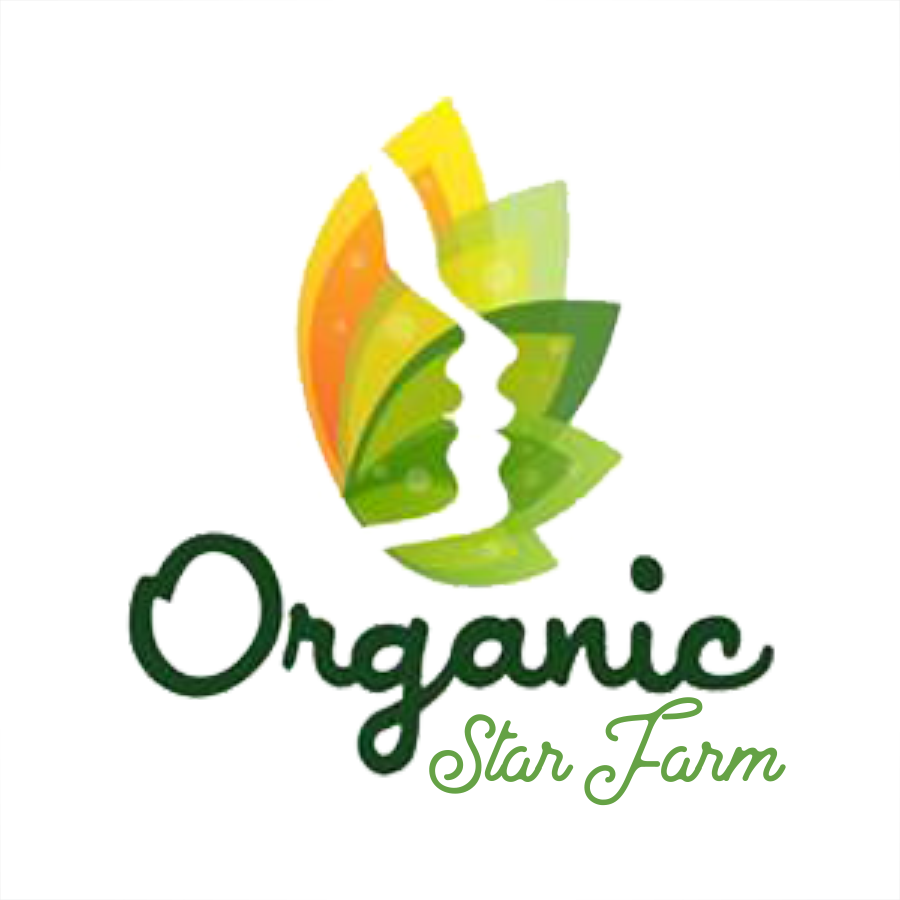
<style>
.page{position:relative;width:900px;height:900px;background:#ffffff}
.page>*{position:absolute;margin:0}
.t1{font:125px "FS-North-Land";color:#65a245}
</style>
<div class="page">
<p class="t1" style="left:429px;top:697px;width:357px;height:109px">Star Farm</p>
</div>
